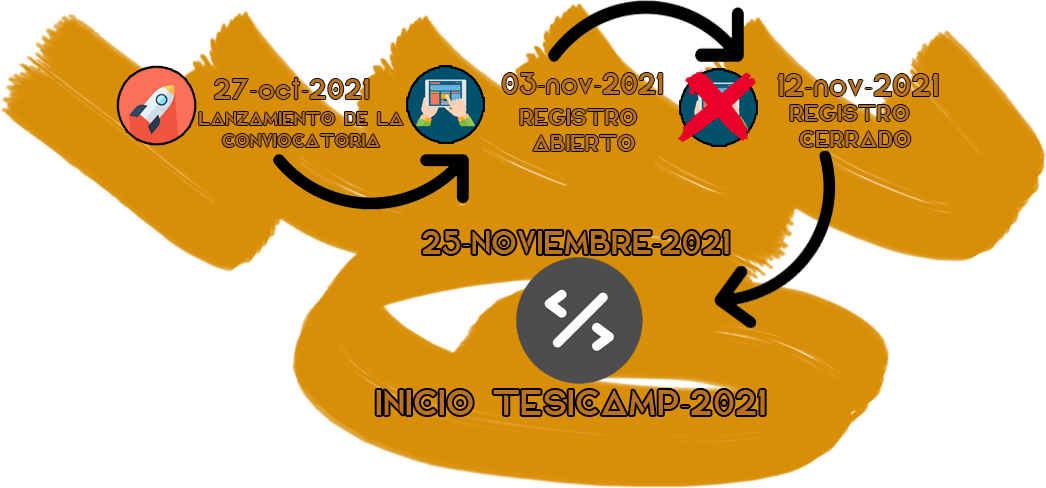
<style>
.page{position:relative;width:1046px;height:488px;background:#ffffff}
.page>*{position:absolute;margin:0}
.t1{font:29.7px "Elianto-Regular";color:#b87220}
.t2{font:17.9px "Elianto-Regular";color:#b87220}
.t3{font:21.8px "Elianto-Regular";color:#b87220}
.t4{font:31px "Elianto-Regular";color:#b87220}
.t5{font:34.4px "Elianto-Regular";color:#b87220}
</style>
<div class="page">
<p class="t1" style="left:778px;top:74px;width:160px;height:22px">12-nov-2021</p>
<p class="t2" style="left:199px;top:112px;width:204px;height:35px;text-align:center">LANZAMIENTO DE LA<br>CONVIOCATORIA</p>
<p class="t3" style="left:520px;top:109px;width:117px;height:42px;text-align:center">REGISTRO <br>ABIERTO</p>
<p class="t4" style="left:423px;top:231px;width:306px;height:23px">25-NOVIEMBRE-2021</p>
<p class="t5" style="left:376px;top:390px;width:389px;height:25px">INICIO TESICAMP-2021</p>
</div>
